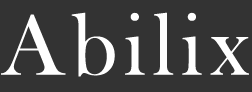
<style>
.page{position:relative;width:252px;height:92px;background:#333333}
.page>*{position:absolute;margin:0}
.t1{font:90px "BaskOldFace";letter-spacing:0.075em;color:#ffffff}
</style>
<div class="page">
<p class="t1" style="left:1px;top:12px;width:248px;height:65px">Abilix</p>
</div>
